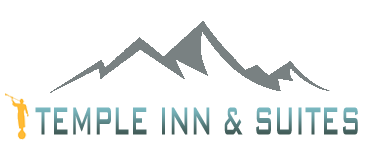
<style>
.page{position:relative;width:370px;height:152px;background:#ffffff}
.page>*{position:absolute;margin:0}
.t1{font:52.4px "BankGothicBT-Medium";scale:0.48 1}
</style>
<div class="page">
<p class="t1" style="left:35px;top:107px;width:323px;height:28px">TEMPLE INN &amp; SUITES</p>
</div>
